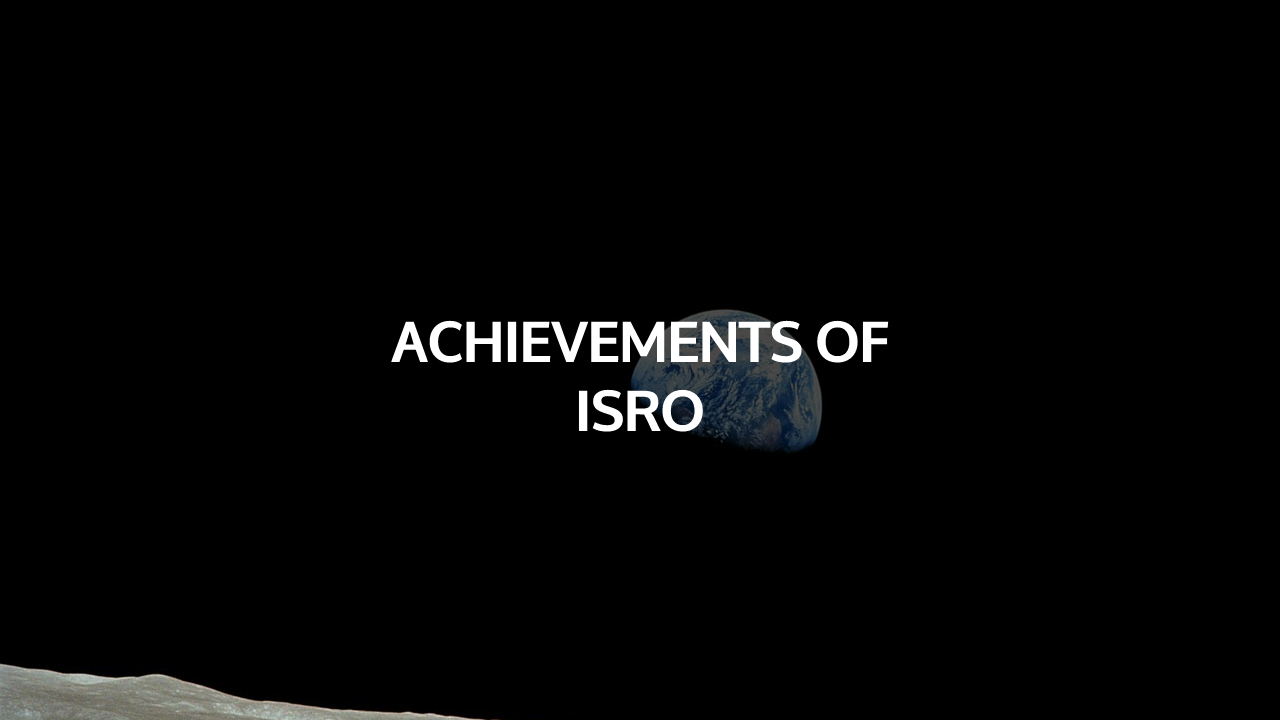
<style>
.page{position:relative;width:1280px;height:720px;background:#000000}
.page>*{position:absolute;margin:0}
.t1{font:57px "Oxygen-Bold";color:#ffffff}
</style>
<div class="page">
<p class="t1" style="left:391px;top:320px;width:498px;height:112px;text-align:center">ACHIEVEMENTS OF<br>ISRO</p>
</div>
